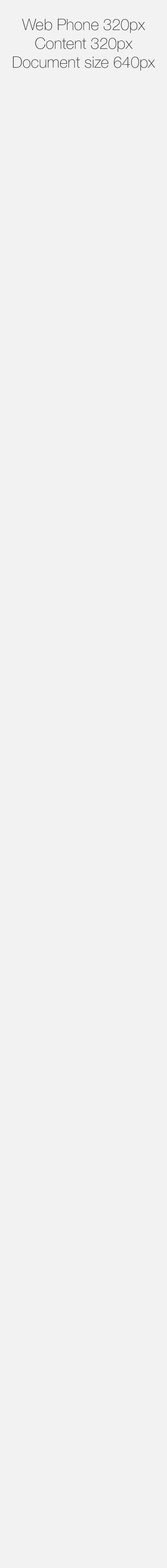
<style>
.page{position:relative;width:167px;height:1568px;background:#f2f2f2}
.page>*{position:absolute;margin:0}
.t1{font:15.7px "HelveticaNeue-Thin";color:#373737}
</style>
<div class="page">
<p class="t1" style="left:13px;top:19px;width:142px;height:52px;text-align:center">Web Phone 320px<br>Content 320px<br>Document size 640px</p>
</div>
